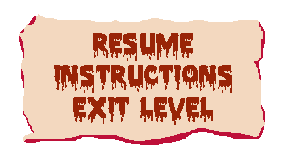
<style>
.page{position:relative;width:284px;height:160px;background:#f3d8bf}
.page>*{position:absolute;margin:0}
.t1{font:23px "PiecesNFI";color:#992407}
</style>
<div class="page">
<p class="t1" style="left:93px;top:33px;width:100px;height:28px">RESUME</p>
<p class="t1" style="left:54px;top:65px;width:178px;height:28px">INSTRUCTIONS</p>
<p class="t1" style="left:73px;top:97px;width:140px;height:28px">EXIT LEVEL</p>
</div>
